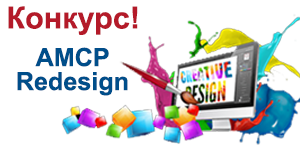
<style>
.page{position:relative;width:300px;height:150px;background:#ffffff}
.page>*{position:absolute;margin:0}
.t1{font:30.6px "Arial-BoldMT";color:#b41a29}
.t2{font:25.2px/24px "Arial-BoldMT";color:#004e8a}
</style>
<div class="page">
<p class="t1" style="left:8px;top:6px;width:130px;height:29px">Конкурс!</p>
<p class="t2" style="left:17px;top:47px;width:111px;height:49px;text-align:center">AMCP<br>Redesign</p>
</div>
